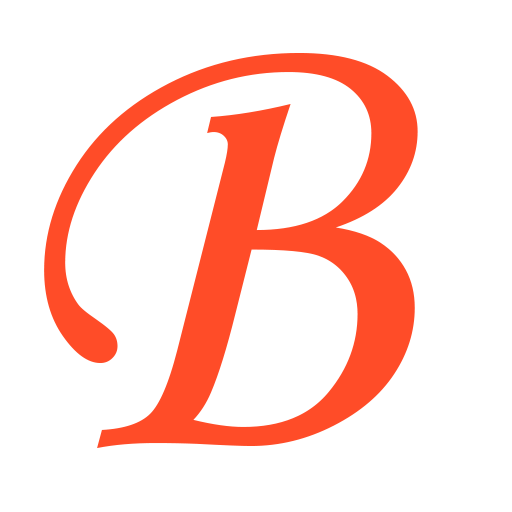
<style>
.page{position:relative;width:512px;height:512px;background:#ffffff}
.page>*{position:absolute;margin:0}
.t1{font:660.9px "MonotypeCorsiva";color:#ff4c28}
</style>
<div class="page">
<p class="t1" style="left:44px;top:53px;width:374px;height:395px">B</p>
</div>
